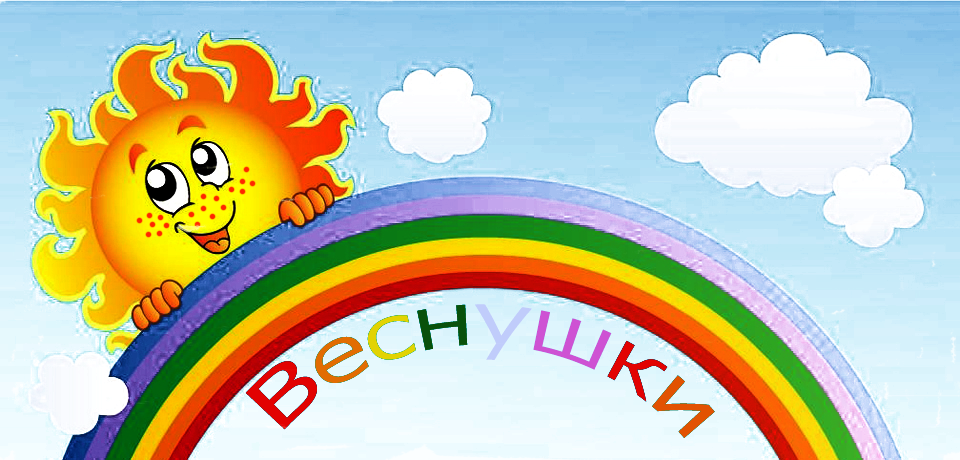
<style>
.page{position:relative;width:960px;height:460px}
.page>*{position:absolute;margin:0}
.t1{font:72px "Meiryo"}
.t2{font:72px "BlackadderITC-Regular"}
</style>
<div class="page">
<p class="t1" style="left:245px;top:304px;width:470px;height:134px"><span class="t2"> </span>Веснушки</p>
</div>
